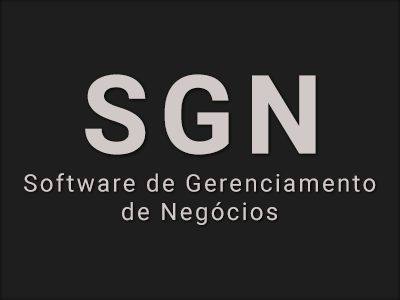
<style>
.page{position:relative;width:400px;height:300px;background:#1e1e1e}
.page>*{position:absolute;margin:0}
.t1{font:109.3px "Roboto-Bold";letter-spacing:0.1em;color:#d1c8c8}
.t2{font:23.9px "Roboto-Regular";letter-spacing:0.1em;color:#d1c8c8}
</style>
<div class="page">
<p class="t1" style="left:85px;top:74px;width:231px;height:81px">SGN</p>
<p class="t2" style="left:24px;top:173px;width:352px;height:52px;text-align:center">Software de Gerenciamento<br>de Negócios</p>
</div>
